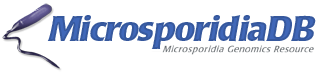
<style>
.page{position:relative;width:317px;height:72px;background:#ffffff}
.page>*{position:absolute;margin:0}
.t1{font:34px "PopplLaudatio-Bold";letter-spacing:-0.03em;color:#37599f;font-style:italic}
</style>
<div class="page">
<p class="t1" style="left:47px;top:15px;width:269px;height:34px">MicrosporidiaDB</p>
</div>
